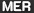
<style>
.page{position:relative;width:34px;height:13px}
.page>*{position:absolute;margin:0}
.t1{font:13.9px "K2D-ExtraBold";color:#ffffff}
</style>
<div class="page">
<p class="t1" style="left:2px;top:1px;width:29px;height:11px">MER</p>
</div>
